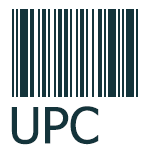
<style>
.page{position:relative;width:150px;height:150px;background:#ffffff}
.page>*{position:absolute;margin:0}
.t1{font:50px "Tahoma";color:#14343b}
</style>
<div class="page">
<p class="t1" style="left:11px;top:106px;width:88px;height:39px">UPC</p>
</div>
